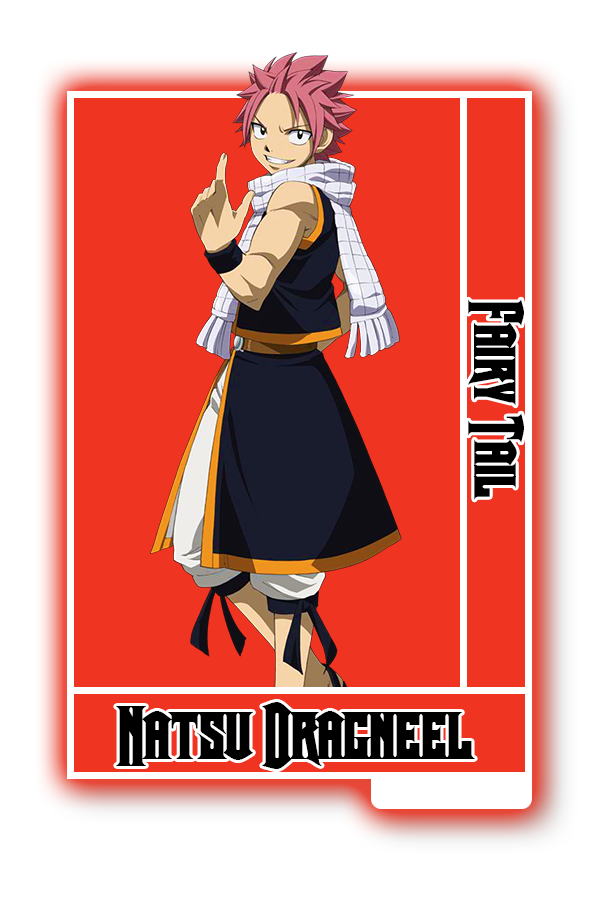
<style>
.page{position:relative;width:600px;height:900px;background:#ef3422}
.page>*{position:absolute;margin:0}
.t1{font:61.5px "Crown-Title";color:#000000}
.t2{font:70.1px "Crown-Title";color:#000000}
</style>
<div class="page">
<p class="t1" style="left:468px;top:299px;width:56px;height:201px;rotate:90deg">Fairy Tail</p>
<p class="t2" style="left:116px;top:702px;width:359px;height:67px">Natsu Dragneel</p>
</div>
